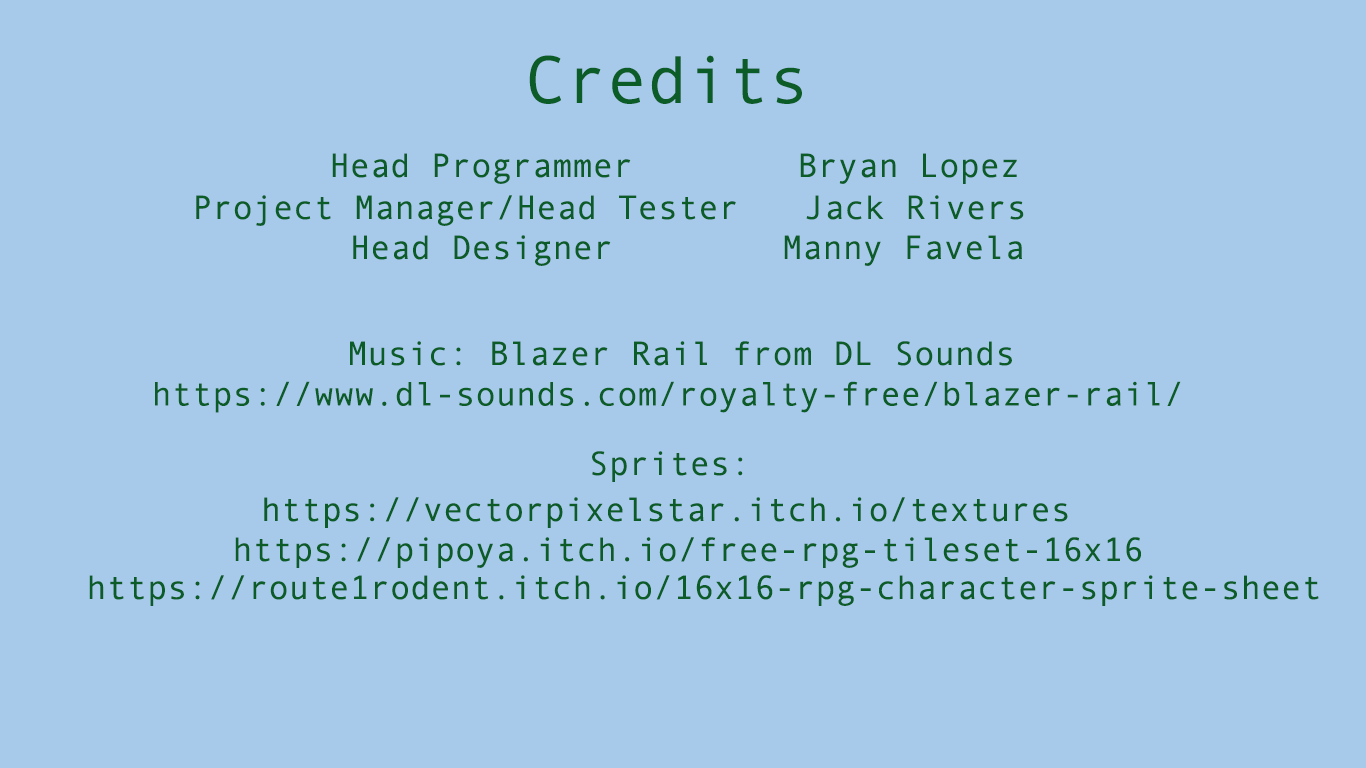
<style>
.page{position:relative;width:1366px;height:768px;background:#a7caeb}
.page>*{position:absolute;margin:0}
.t1{font:67.5px "AndaleMono";color:#0c5c28}
.t2{font:33.8px "AndaleMono";color:#0c5c28}
</style>
<div class="page">
<p class="t1" style="left:529px;top:55px;width:273px;height:49px">Credits</p>
<p class="t2" style="left:332px;top:153px;width:685px;height:31px">Head Programmer     Bryan Lopez</p>
<p class="t2" style="left:196px;top:195px;width:828px;height:31px">Project Manager/Head Tester  Jack Rivers</p>
<p class="t2" style="left:353px;top:235px;width:669px;height:31px">Head Designer     Manny Favela</p>
<p class="t2" style="left:155px;top:341px;width:1026px;height:72px;text-align:center">Music: Blazer Rail from DL Sounds <br>https://www.dl-sounds.com/royalty-free/blazer-rail/</p>
<p class="t2" style="left:592px;top:451px;width:151px;height:31px">Sprites:</p>
<p class="t2" style="left:264px;top:497px;width:804px;height:31px">https://vectorpixelstar.itch.io/textures</p>
<p class="t2" style="left:235px;top:537px;width:906px;height:31px">https://pipoya.itch.io/free-rpg-tileset-16x16</p>
<p class="t2" style="left:89px;top:575px;width:1230px;height:31px">https://route1rodent.itch.io/16x16-rpg-character-sprite-sheet</p>
</div>
